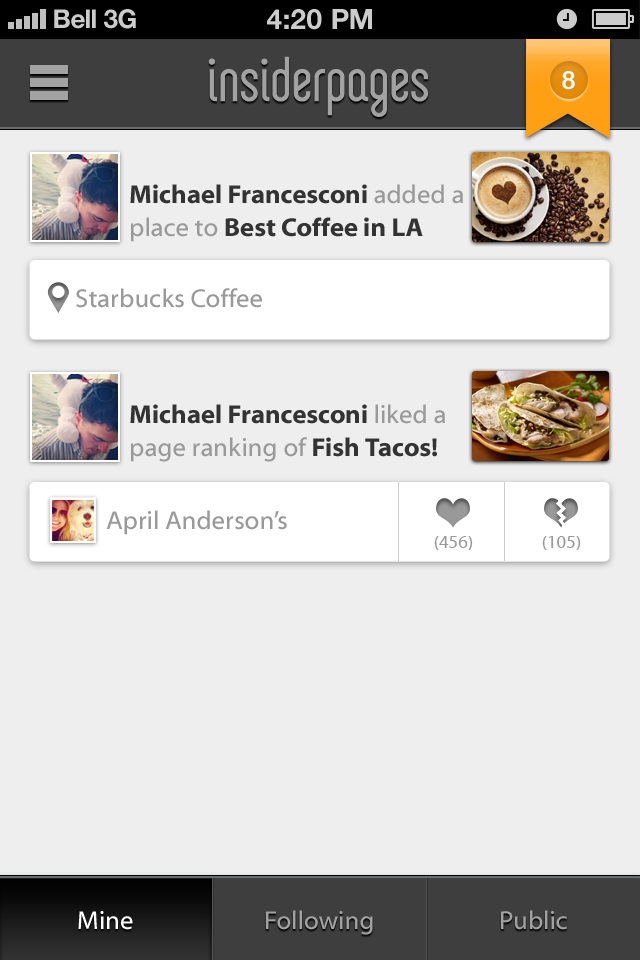
<style>
.page{position:relative;width:640px;height:960px;background:#eeeeee}
.page>*{position:absolute;margin:0}
.t1{font:26px "HelveticaNeue-Bold";color:#cccccc}
.t2{font:26px "HelveticaNeue-Bold";color:#cccccc;text-transform:uppercase}
.t3{font:28px "HelveticaNeue-Bold";color:#cccccc;text-transform:uppercase}
.t4{font:25px "ArialRoundedMT-Bold";color:#ffffff}
.t5{font:26px/33px "MyriadWebPro-Bold";color:#333333}
.t6{font:26px/33px "MyriadWebPro";color:#999999}
.t7{font:26px "MyriadWebPro";color:#999999}
.t8{font:18px "MyriadWebPro";letter-spacing:0.005em;color:#999999}
.t9{font:26px "MyriadWebPro";color:#ffffff}
.t10{font:26px "MyriadWebPro";color:#a2a2a2}
</style>
<div class="page">
<p class="t1" style="left:54px;top:9px;width:42px;height:20px">Bell</p>
<p class="t2" style="left:104px;top:9px;width:32px;height:20px">3G</p>
<p class="t3" style="left:267px;top:9px;width:105px;height:21px">4:20 pM</p>
<p class="t4" style="left:562px;top:71px;width:13px;height:19px">8</p>
<p class="t5" style="left:130px;top:184px;width:333px;height:58px">Michael Francesconi <span class="t6">added a  <br>place to </span>Best Coffee in LA</p>
<p class="t7" style="left:76px;top:288px;width:186px;height:20px">Starbucks Coffee</p>
<p class="t6" style="left:130px;top:404px;width:315px;height:58px"><span class="t5">Michael Francesconi </span>liked a<br>page ranking of <span class="t5">Fish Tacos!</span></p>
<p class="t7" style="left:106px;top:510px;width:181px;height:25px">April Anderson’s</p>
<p class="t8" style="left:434px;top:536px;width:39px;height:14px">(456)</p>
<p class="t8" style="left:542px;top:536px;width:39px;height:14px">(105)</p>
<p class="t9" style="left:78px;top:911px;width:55px;height:19px">Mine</p>
<p class="t10" style="left:266px;top:910px;width:107px;height:25px">Following</p>
<p class="t10" style="left:501px;top:910px;width:66px;height:20px">Public</p>
</div>
